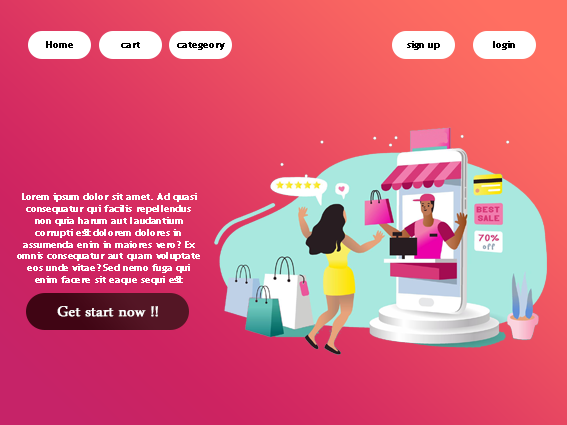
<style>
.page{position:relative;width:567px;height:425px}
.page>*{position:absolute;margin:0}
.t1{font:10px "TrebuchetMS";color:#000000;font-weight:bold}
.t2{font:9.8px "TrebuchetMS";color:#ffffff;font-weight:bold}
.t3{font:21.1px "ArabicTypesetting";color:#ffffff;font-weight:bold}
</style>
<div class="page">
<p class="t1" style="left:46px;top:41px;width:27px;height:7px">Home</p>
<p class="t1" style="left:407px;top:41px;width:33px;height:9px">sign up</p>
<p class="t1" style="left:493px;top:41px;width:22px;height:9px">login</p>
<p class="t1" style="left:121px;top:42px;width:19px;height:6px">cart</p>
<p class="t1" style="left:177px;top:42px;width:48px;height:8px">categeory</p>
<p class="t2" style="left:17px;top:193px;width:183px;height:92px;text-align:center">Lorem ipsum dolor sit amet. Ad quasi consequatur qui facilis repellendus non quia harum aut laudantium corrupti est dolorem dolores in assumenda enim in maiores vero? Ex omnis consequatur aut quam voluptate eos unde vitae? Sed nemo fuga qui enim facere sit eaque sequi est tempora dignissimos et quia rerum ad magnam nihil ut odio voluptatem</p>
<p class="t3" style="left:57px;top:306px;width:101px;height:11px">Get start now !!</p>
</div>
